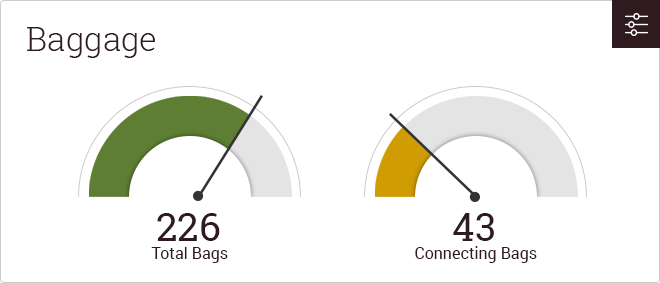
<style>
.page{position:relative;width:660px;height:283px;background:#ffffff}
.page>*{position:absolute;margin:0}
.t1{font:33px "RobotoSlab-Light";color:#2f1b1f}
.t2{font:39px "RobotoSlab-Regular";color:#2f1b1f}
.t3{font:16px "Roboto-Regular";color:#2f1b1f}
</style>
<div class="page">
<p class="t1" style="left:27px;top:27px;width:128px;height:31px">Baggage</p>
<p class="t2" style="left:157px;top:213px;width:63px;height:28px">226</p>
<p class="t2" style="left:453px;top:213px;width:41px;height:28px">43</p>
<p class="t3" style="left:415px;top:246px;width:122px;height:17px">Connecting Bags</p>
<p class="t3" style="left:151px;top:247px;width:77px;height:16px">Total Bags</p>
</div>
